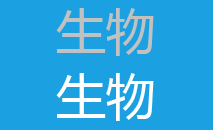
<style>
.page{position:relative;width:213px;height:130px;background:#1ba1e2}
.page>*{position:absolute;margin:0}
.t1{font:50px "MicrosoftYaHei";color:#c1c1c1}
.t2{font:50px "MicrosoftYaHei";color:#ffffff}
</style>
<div class="page">
<p class="t1" style="left:56px;top:8px;width:98px;height:48px">生物</p>
<p class="t2" style="left:56px;top:73px;width:98px;height:48px">生物</p>
</div>
